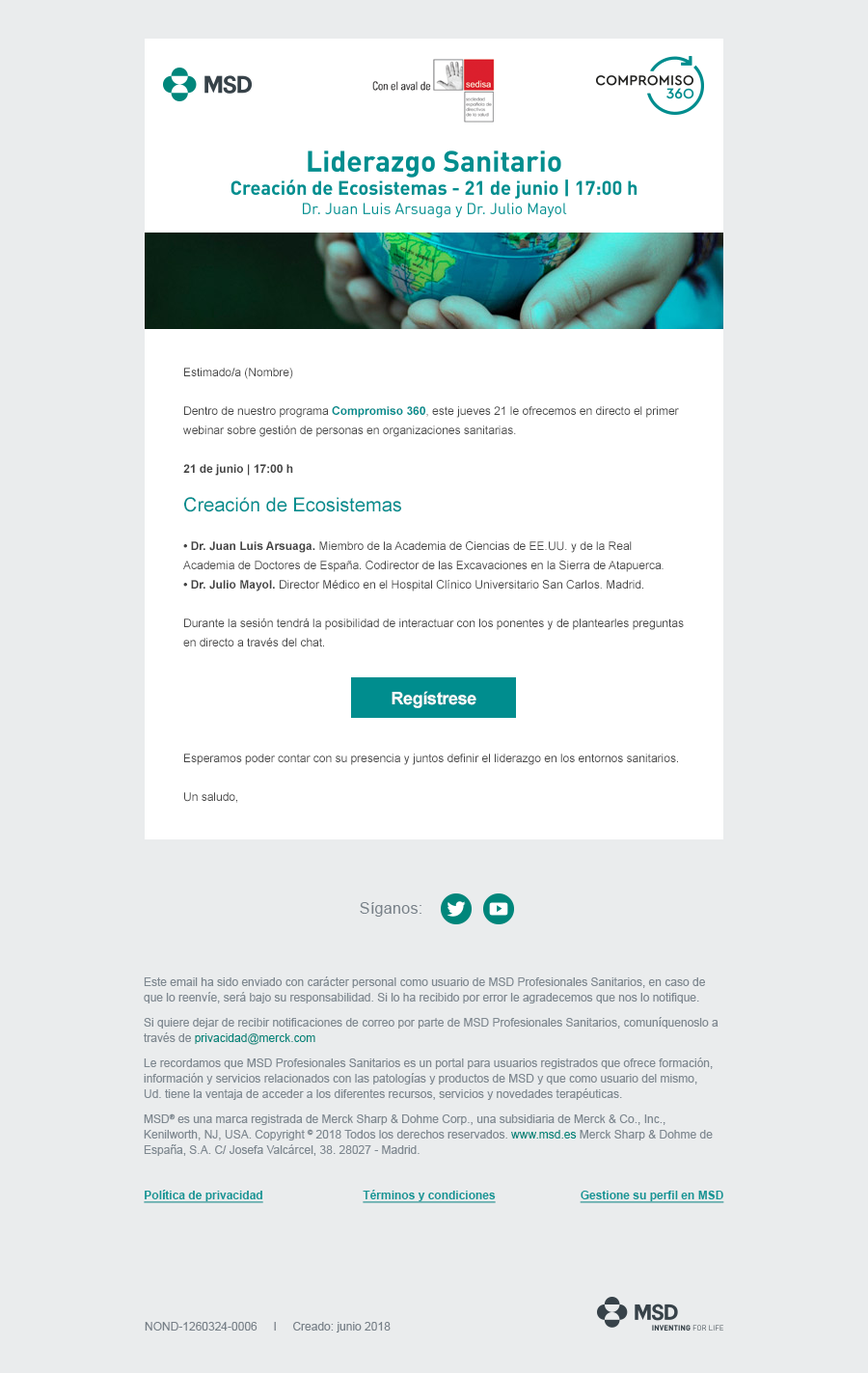
<style>
.page{position:relative;width:868px;height:1373px;background:#eaeced}
.page>*{position:absolute;margin:0}
.t1{font:11.6px/19.3px "ArialMT";color:#444444}
.t2{font:11.6px/19.3px "Arial-BoldMT";color:#008d8e}
.t3{font:11.6px/19.3px "Arial-BoldMT";color:#444444}
.t4{font:19.3px/19.3px "ArialMT";color:#008d8e}
.t5{font:17.4px "Arial-BoldMT";letter-spacing:-0.02em;color:#ffffff}
.t6{font:15.4px "ArialMT";letter-spacing:0.02em;color:#788189}
.t7{font:11.6px/15.4px "ArialMT";color:#7e8890}
.t8{font:11.6px/15.4px "ArialMT";color:#00867b}
.t9{font:11.6px "Arial-BoldMT";color:#139696;text-decoration:underline}
.t10{font:11.6px "ArialMT";color:#778088}
</style>
<div class="page">
<p class="t1" style="left:183px;top:368px;width:501px;height:435px">Estimado/a (Nombre)<br><br>Dentro de nuestro programa <span class="t2">Compromiso 360</span>, este jueves 21 le ofrecemos en directo el primer webinar sobre gestión de personas en organizaciones sanitarias.<br><br><span class="t3">21 de junio | 17:00 h<br><br></span><span class="t4">Creación de Ecosistemas <br><br><br></span><span class="t3">• Dr. Juan Luis Arsuaga.</span> Miembro de la Academia de Ciencias de EE.UU. y de la Real Academia de Doctores de España. Codirector de las Excavaciones en la Sierra de Atapuerca.<br><span class="t3">• Dr. Julio Mayol.</span> Director Médico en el Hospital Clínico Universitario San Carlos. Madrid. <br><br><br><br>Durante la sesión tendrá la posibilidad de interactuar con los ponentes y de plantearles preguntas en directo a través del chat.<br><br><br><br><br><br>Esperamos poder contar con su presencia y juntos definir el liderazgo en los entornos sanitarios.<br><br>Un saludo,</p>
<p class="t5" style="left:392px;top:691px;width:85px;height:17px">Regístrese</p>
<p class="t6" style="left:360px;top:902px;width:62px;height:15px">Síganos:</p>
<p class="t7" style="left:144px;top:977px;width:575px;height:179px">Este email ha sido enviado con carácter personal como usuario de MSD Profesionales Sanitarios, en caso de que lo reenvíe, será bajo su responsabilidad. Si lo ha recibido por error le agradecemos que nos lo notifique. <br>Si quiere dejar de recibir notificaciones de correo por parte de MSD Profesionales Sanitarios, comuníquenoslo a través de <span class="t8">privacidad@merck.com</span> <br>Le recordamos que MSD Profesionales Sanitarios es un portal para usuarios registrados que ofrece formación, información y servicios relacionados con las patologías y productos de MSD y que como usuario del mismo,<br>Ud. tiene la ventaja de acceder a los diferentes recursos, servicios y novedades terapéuticas. <br>MSD® es una marca registrada de Merck Sharp &amp; Dohme Corp., una subsidiaria de Merck &amp; Co., Inc., Kenilworth, NJ, USA. Copyright © 2018 Todos los derechos reservados. <span class="t8">www.msd.es</span> Merck Sharp &amp; Dohme de España, S.A. C/ Josefa Valcárcel, 38. 28027 - Madrid.</p>
<p class="t9" style="left:144px;top:1190px;width:119px;height:13px">Política de privacidad</p>
<p class="t9" style="left:363px;top:1190px;width:133px;height:13px">Términos y condiciones</p>
<p class="t9" style="left:580px;top:1191px;width:145px;height:12px">Gestione su perfil en MSD</p>
<p class="t10" style="left:145px;top:1322px;width:246px;height:11px">NOND-1260324-0006     I     Creado: junio 2018</p>
</div>
